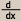
<style>
.page{position:relative;width:21px;height:21px;background:#d9cdc1}
.page>*{position:absolute;margin:0}
.t1{font:9px "Tahoma";color:#000000}
</style>
<div class="page">
<p class="t1" style="left:6px;top:1px;width:10px;height:18px">d<br> dx</p>
</div>
